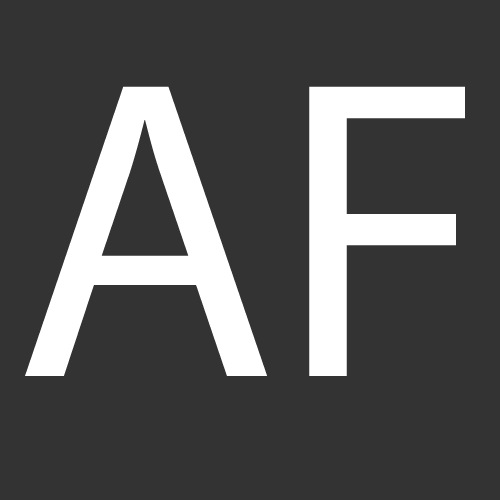
<style>
.page{position:relative;width:500px;height:500px;background:#333333}
.page>*{position:absolute;margin:0}
.t1{font:428.6px "MyriadPro-Regular";color:#ffffff}
</style>
<div class="page">
<p class="t1" style="left:25px;top:86px;width:440px;height:290px">AF</p>
</div>
